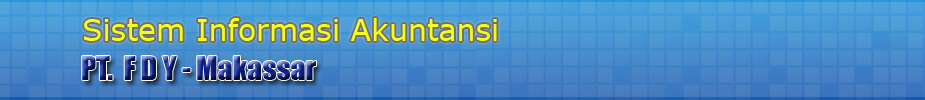
<style>
.page{position:relative;width:925px;height:100px}
.page>*{position:absolute;margin:0}
.t1{font:30px "Verdana";color:#f2ff1a}
.t2{font:30px "Impact"}
</style>
<div class="page">
<p class="t1" style="left:84px;top:18px;width:413px;height:23px">Sistem Informasi Akuntansi</p>
<p class="t2" style="left:82px;top:56px;width:234px;height:24px">PT.  F D Y - Makassar</p>
</div>
